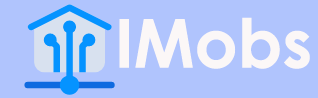
<style>
.page{position:relative;width:318px;height:98px;background:#b0c4fd}
.page>*{position:absolute;margin:0}
.t1{font:67.6px "CenturyGothic-Bold";color:#fbf7f7}
</style>
<div class="page">
<p class="t1" style="left:119px;top:17px;width:191px;height:52px">IMobs</p>
</div>
